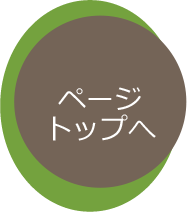
<style>
.page{position:relative;width:187px;height:212px;background:#746457}
.page>*{position:absolute;margin:0}
.t1{font:28px/30px "Meiryo";color:#ffffff}
</style>
<div class="page">
<p class="t1" style="left:53px;top:87px;width:103px;height:54px;text-align:center">ページ<br>トップへ</p>
</div>
